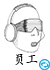
<style>
.page{position:relative;width:50px;height:70px;background:#ffffff}
.page>*{position:absolute;margin:0}
.t1{font:13.1px "STKaiti";color:#000000;scale:0.95 1}
</style>
<div class="page">
<p class="t1" style="left:15px;top:54px;width:23px;height:11px">员工</p>
</div>
